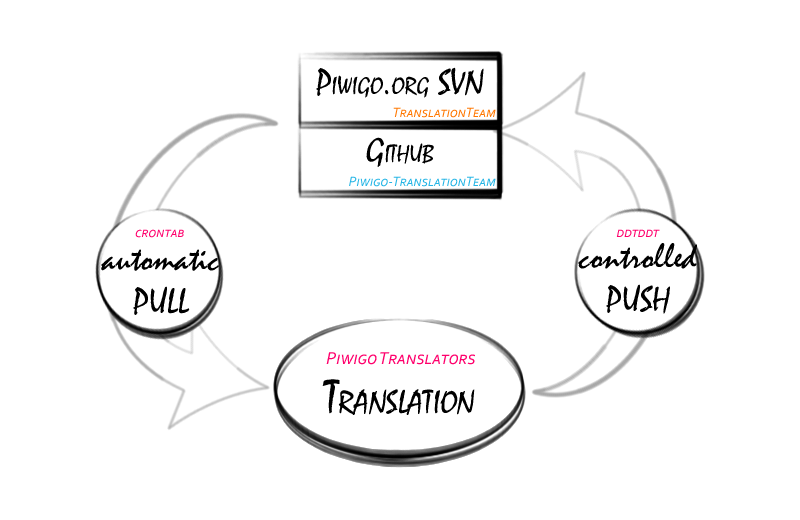
<style>
.page{position:relative;width:800px;height:520px;background:#ffffff}
.page>*{position:absolute;margin:0}
.t1{font:36px "Mistral";color:#000000;font-variant:small-caps}
.t2{font:14px "Corbel-Italic";color:#ff7700;font-variant:small-caps}
.t3{font:14px "Corbel-Italic";color:#25b5e5;font-variant:small-caps}
.t4{font:14px "Corbel-Italic";color:#ff006c;font-variant:small-caps}
.t5{font:36px "Mistral";color:#000000}
.t6{font:18px "Corbel-Italic";color:#ff006c;font-variant:small-caps}
.t7{font:48px "Mistral";color:#000000;font-variant:small-caps}
</style>
<div class="page">
<p class="t1" style="left:316px;top:67px;width:168px;height:31px">Piwigo.org SVN</p>
<p class="t2" style="left:393px;top:107px;width:103px;height:11px">TranslationTeam</p>
<p class="t1" style="left:366px;top:137px;width:68px;height:30px">Github</p>
<p class="t3" style="left:349px;top:176px;width:147px;height:11px">Piwigo-TranslationTeam</p>
<p class="t4" style="left:135px;top:229px;width:49px;height:9px">crontab</p>
<p class="t4" style="left:616px;top:229px;width:44px;height:8px">ddtddt</p>
<p class="t5" style="left:578px;top:243px;width:119px;height:71px;text-align:center">controlled<br>PUSH</p>
<p class="t5" style="left:101px;top:249px;width:118px;height:66px;text-align:center">automatic<br>PULL</p>
<p class="t6" style="left:326px;top:352px;width:149px;height:13px">Piwigo Translators</p>
<p class="t7" style="left:322px;top:379px;width:153px;height:36px">Translation</p>
</div>
